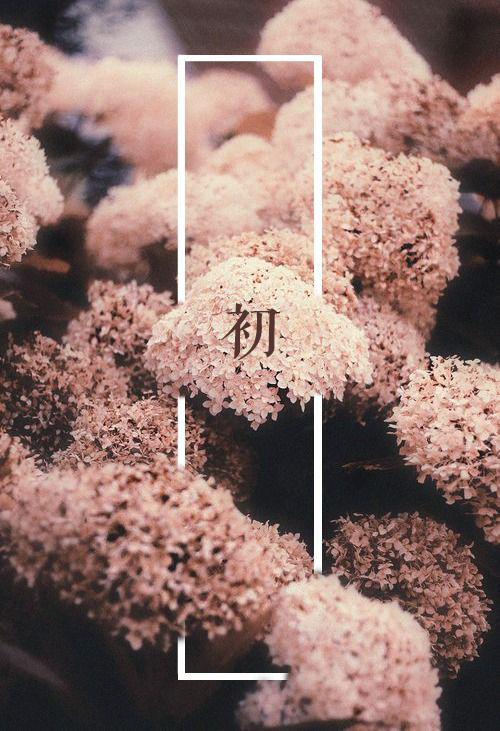
<style>
.page{position:relative;width:500px;height:731px}
.page>*{position:absolute;margin:0}
.t1{font:60px "FZQKBYSJW--GB1-0";letter-spacing:0.1em;color:#533430}
</style>
<div class="page">
<p class="t1" style="left:221px;top:303px;width:56px;height:58px">初</p>
</div>
